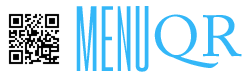
<style>
.page{position:relative;width:243px;height:74px;background:#ffffff}
.page>*{position:absolute;margin:0}
.t1{font:67.8px "GoboldHighThin";color:#33b7f8}
.t2{font:57.6px "ACaslonPro-Regular";color:#33b7f8}
</style>
<div class="page">
<p class="t1" style="left:76px;top:6px;width:73px;height:66px">MENU</p>
<p class="t2" style="left:154px;top:14px;width:88px;height:54px">QR</p>
</div>
